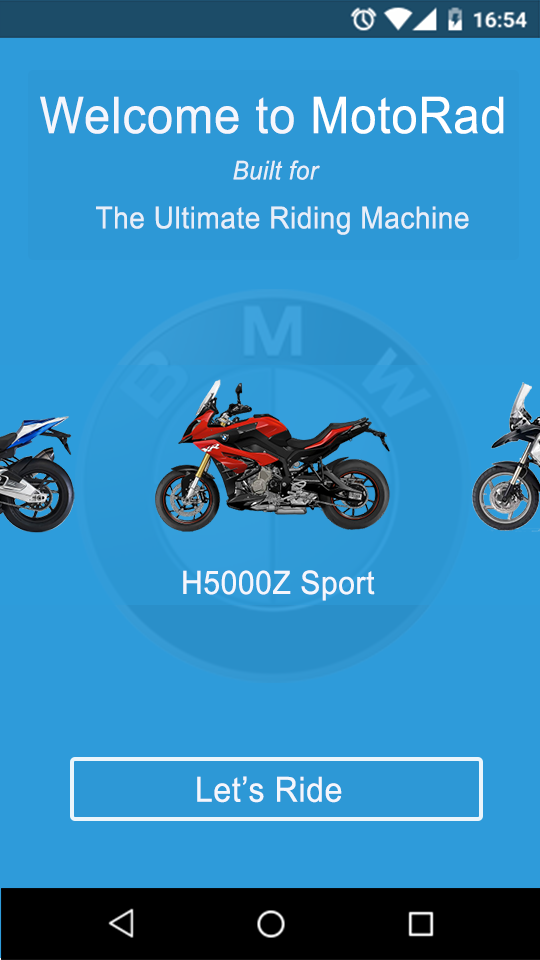
<style>
.page{position:relative;width:540px;height:960px;background:#2e9bda}
.page>*{position:absolute;margin:0}
.t1{font:50.8px "ArialMT";letter-spacing:0.02em;color:#f5f6fc;scale:0.93 1}
.t2{font:50.8px "ArialMT";letter-spacing:0.02em;color:#ffffff;scale:0.93 1}
.t3{font:25.9px "Arial-ItalicMT";letter-spacing:0.02em;color:#f5f6fc;scale:0.93 1}
.t4{font:30.2px "ArialMT";letter-spacing:0.02em;color:#f5f6fc;scale:0.93 1}
.t5{font:32.4px "ArialMT";letter-spacing:0.02em;color:#f5f6fc;scale:0.93 1}
.t6{font:34.6px "ArialMT";letter-spacing:0.02em;color:#f5f6fc;scale:0.93 1}
</style>
<div class="page">
<p class="t1" style="left:40px;top:96px;width:464px;height:38px">Welcome to <span class="t2">MotoRad</span></p>
<p class="t3" style="left:233px;top:160px;width:87px;height:20px;opacity:0.9">Built for</p>
<p class="t4" style="left:96px;top:206px;width:373px;height:29px;opacity:0.9">The Ultimate Riding Machine</p>
<p class="t5" style="left:183px;top:570px;width:192px;height:31px">H5000Z Sport</p>
<p class="t6" style="left:197px;top:776px;width:145px;height:27px">Let’s Ride</p>
</div>
